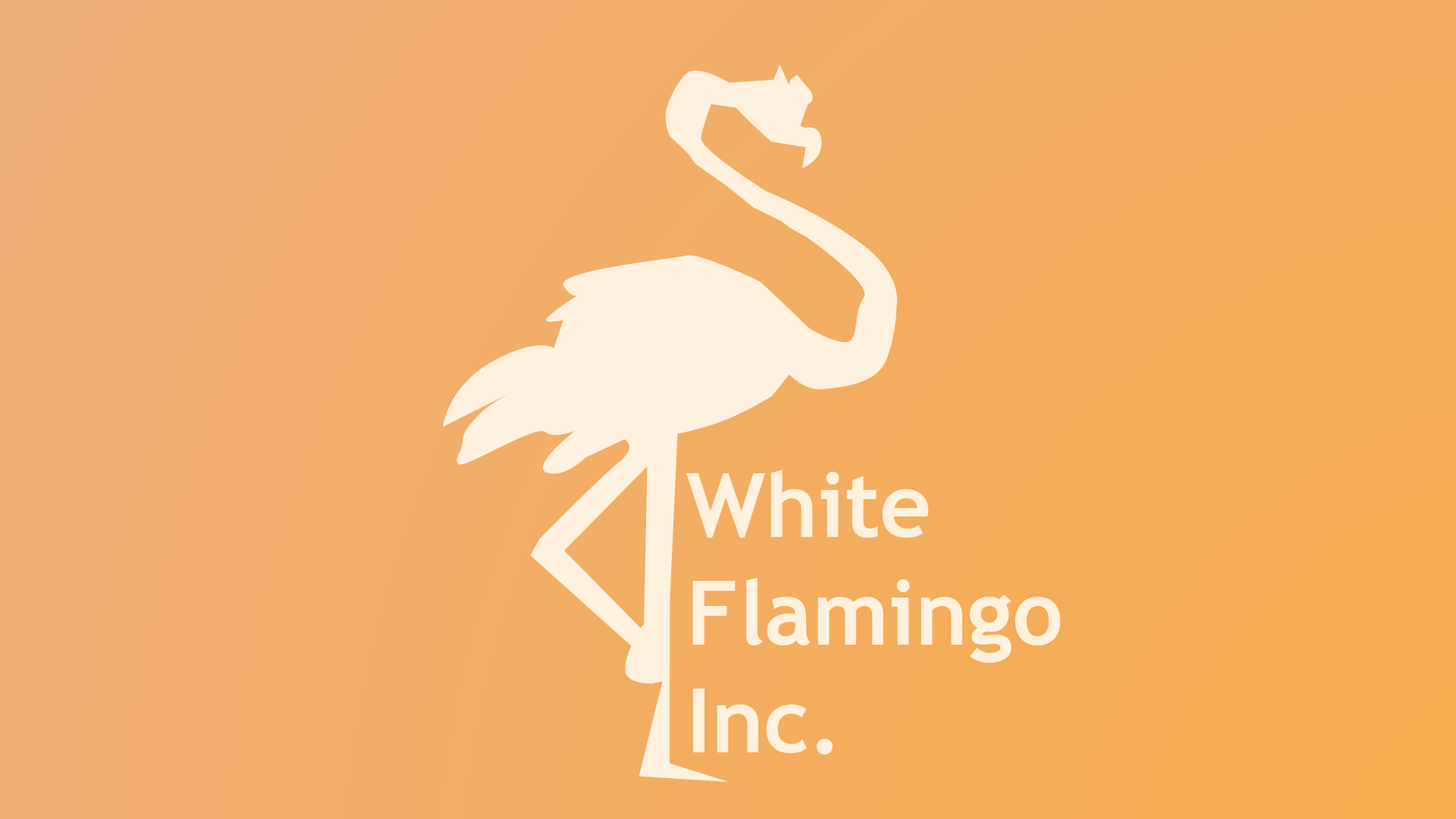
<style>
.page{position:relative;width:1456px;height:819px}
.page>*{position:absolute;margin:0}
.t1{font:89.5px "TrebuchetMS-Bold";color:#fff1dd}
</style>
<div class="page">
<p class="t1" style="left:686px;top:470px;width:375px;height:285px">White <br>Flamingo<br>Inc.</p>
</div>
